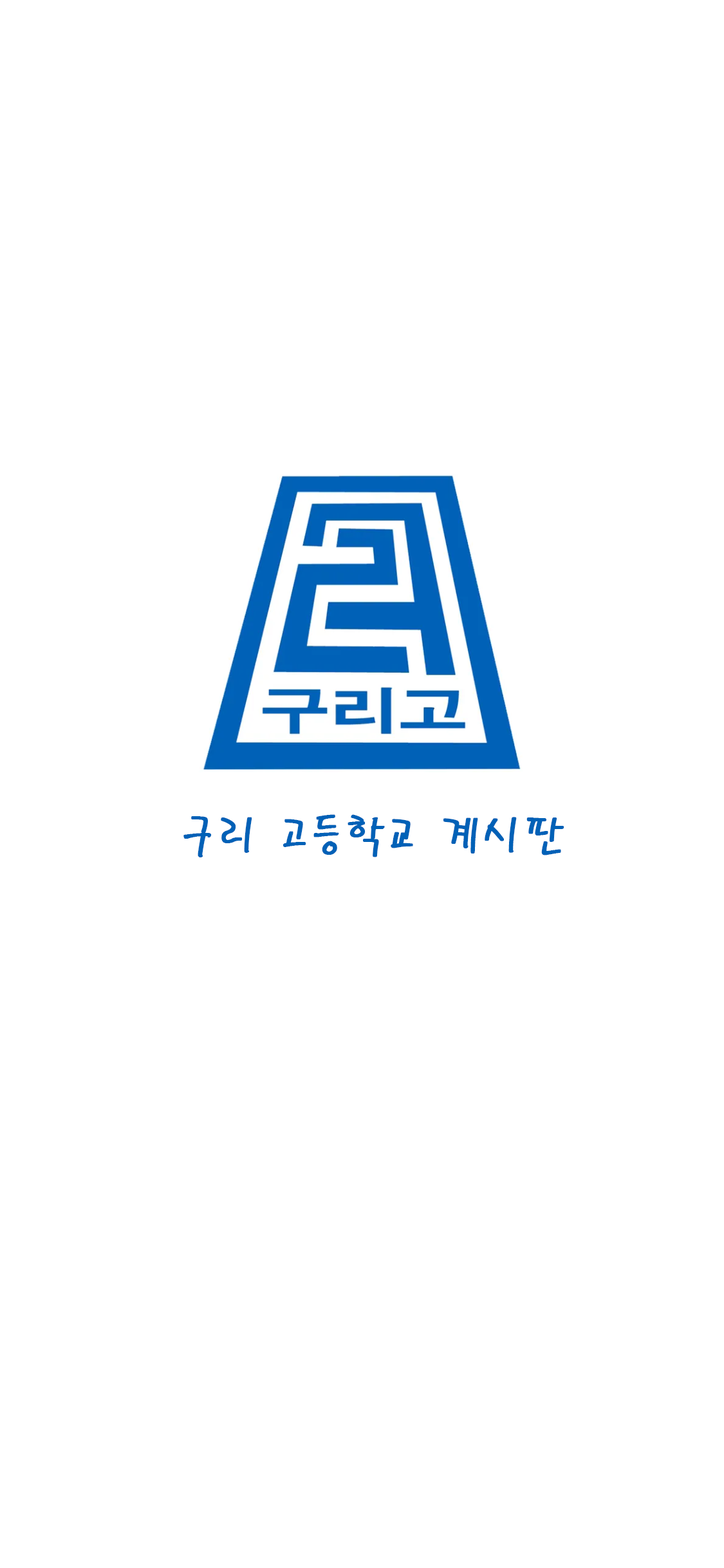
<style>
.page{position:relative;width:724px;height:1568px;background:#ffffff}
.page>*{position:absolute;margin:0}
.t1{font:46.3px "PyunjiR-HM";color:#0061b7;font-weight:bold}
</style>
<div class="page">
<p class="t1" style="left:183px;top:814px;width:382px;height:43px">구리 고등학교 계시판</p>
</div>
